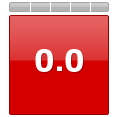
<style>
.page{position:relative;width:117px;height:117px;background:#d40000}
.page>*{position:absolute;margin:0}
.t1{font:36px "Colaborate-Bold";color:#ffffff;text-transform:uppercase}
</style>
<div class="page">
<p class="t1" style="left:35px;top:49px;width:48px;height:23px">0.0</p>
</div>
